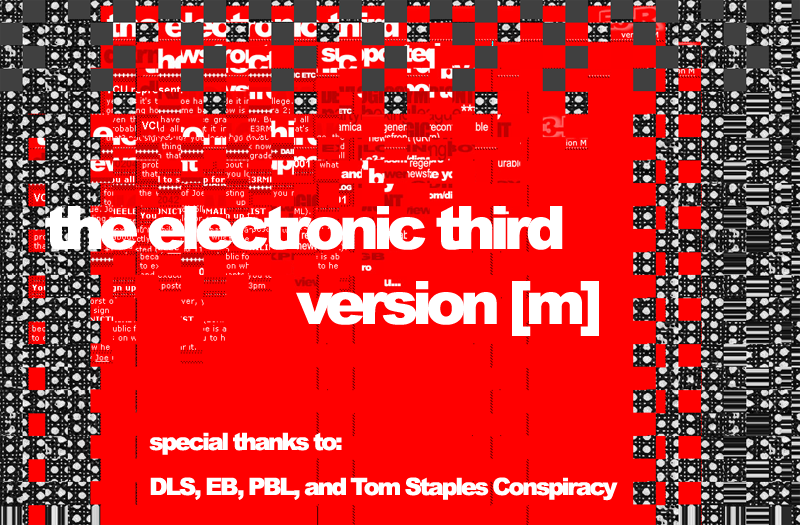
<style>
.page{position:relative;width:800px;height:525px;background:#ff0000}
.page>*{position:absolute;margin:0}
.t1{font:60px/15px "Arial-Black";letter-spacing:-0.1em;color:#ffffff}
.t2{font:24px/15px "Arial-Black";letter-spacing:-0.1em;color:#ffffff}
</style>
<div class="page">
<p class="t1" style="left:45px;top:206px;width:554px;height:130px">the electronic third<br>                    <br><br><br><br>                  version [m]</p>
<p class="t2" style="left:149px;top:432px;width:469px;height:69px">special thanks to:<br><br><br>DLS, EB, PBL, and Tom Staples Conspiracy</p>
</div>
